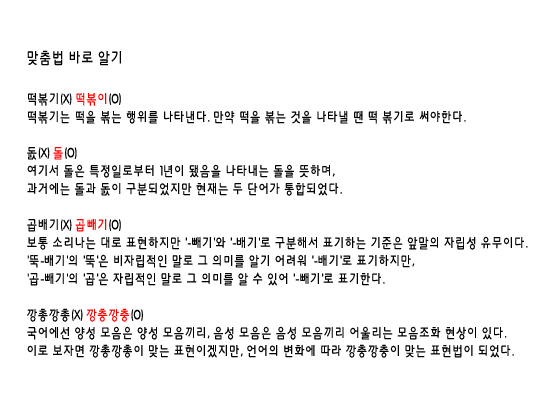
<style>
.page{position:relative;width:550px;height:400px;background:#ffffff}
.page>*{position:absolute;margin:0}
.t1{font:16px "HYkanM";letter-spacing:-0.01em;color:#000000;scale:0.8 1}
.t2{font:14px/18px "HYkanM";letter-spacing:-0.01em;color:#000000;scale:0.8 1}
.t3{font:16px/24px "HYkanM";letter-spacing:-0.01em;color:#000000;scale:0.8 1}
.t4{font:14px/18px "HYkanM";letter-spacing:-0.01em;color:#ff0000;scale:0.8 1}
</style>
<div class="page">
<p class="t1" style="left:27px;top:50px;width:94px;height:16px">맞춤법 바로 알기</p>
<p class="t2" style="left:28px;top:93px;width:438px;height:31px"><span class="t3"><br></span><br>떡볶기(X) <span class="t4">떡볶이</span>(O)<br>떡볶기는 떡을 볶는 행위를 나타낸다. 만약 떡을 볶는 것을 나타낼 땐 떡 볶기로 써야한다.</p>
<p class="t2" style="left:27px;top:147px;width:315px;height:49px"><span class="t3"><br></span><br><br><br><br>돐(X) <span class="t4">돌</span>(O)<br>여기서 돌은 특정일로부터 1년이 됐음을 나타내는 돌을 뜻하며, <br>과거에는 돌과 돐이 구분되었지만 현재는 두 단어가 통합되었다.</p>
<p class="t2" style="left:27px;top:219px;width:501px;height:67px"><span class="t3"><br></span><br><br><br><br><br><br><br><br>곱배기(X) <span class="t4">곱빼기</span>(O)<br>보통 소리나는 대로 표현하지만 '-빼기'와 '-배기'로 구분해서 표기하는 기준은 앞말의 자립성 유무이다.<br>'뚝-배기'의 '뚝'은 비자립적인 말로 그 의미를 알기 어려워 '-배기'로 표기하지만,<br>'곱-빼기'의 '곱'은 자립적인 말로 그 의미를 알 수 있어 '-빼기'로 표기한다.</p>
<p class="t2" style="left:27px;top:308px;width:487px;height:50px"><span class="t3"><br></span><br><br><br><br><br><br><br><br><br><br><br><br><br>깡총깡총(X) <span class="t4">깡충깡충</span>(O)<br>국어에선 양성 모음은 양성 모음끼리, 음성 모음은 음성 모음끼리 어울리는 모음조화 현상이 있다.<br>이로 보자면 깡총깡총이 맞는 표현이겠지만, 언어의 변화에 따라 깡충깡충이 맞는 표현법이 되었다.</p>
</div>
